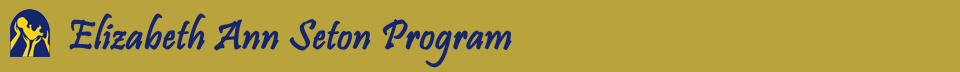
<style>
.page{position:relative;width:960px;height:72px;background:#b8a33d}
.page>*{position:absolute;margin:0}
.t1{font:42px "Pristina-Regular";color:#15266e;font-weight:bold}
</style>
<div class="page">
<p class="t1" style="left:69px;top:13px;width:443px;height:55px">Elizabeth Ann Seton Program</p>
</div>
